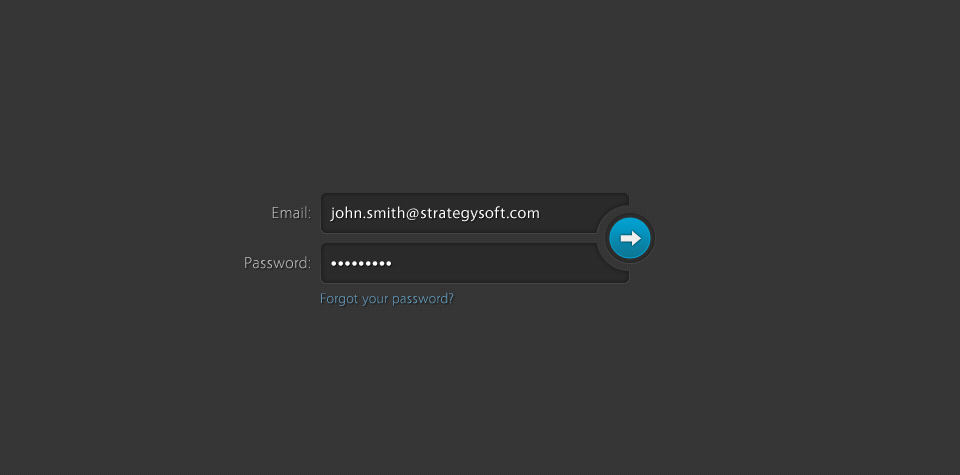
<style>
.page{position:relative;width:960px;height:475px;background:#373737}
.page>*{position:absolute;margin:0}
.t1{font:16px "Vegur-Light";letter-spacing:0.02em;color:#b5b5b5}
.t2{font:16px "Vegur-Regular";letter-spacing:0.02em;color:#ffffff}
.t3{font:16px "Arial-BoldMT";letter-spacing:0.08em;color:#ffffff}
.t4{font:14px "Vegur-Light";letter-spacing:0.02em;color:#6296b4}
</style>
<div class="page">
<p class="t1" style="left:272px;top:206px;width:38px;height:13px">Email:</p>
<p class="t2" style="left:330px;top:206px;width:209px;height:16px">john.smith@strategysoft.com</p>
<p class="t1" style="left:245px;top:256px;width:65px;height:13px">Password:</p>
<p class="t3" style="left:331px;top:261px;width:60px;height:5px">•••••••••</p>
<p class="t4" style="left:321px;top:292px;width:133px;height:14px">Forgot your password?</p>
</div>
